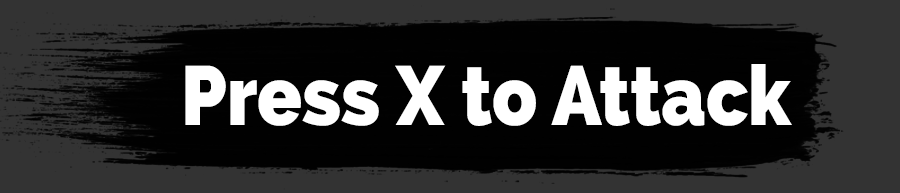
<style>
.page{position:relative;width:900px;height:193px;background:#010101}
.page>*{position:absolute;margin:0}
.t1{font:83.6px "Raleway-Heavy";color:#ffffff;scale:0.88 1}
</style>
<div class="page">
<p class="t1" style="left:185px;top:64px;width:607px;height:62px">Press X to Attack</p>
</div>
